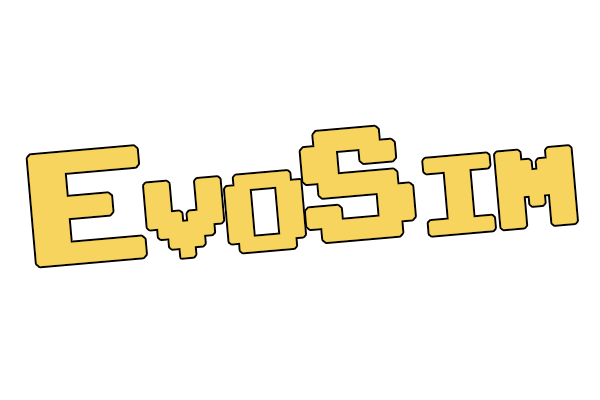
<style>
.page{position:relative;width:600px;height:400px;background:#ffffff}
.page>*{position:absolute;margin:0}
.t1{font:210.3px "ArcadeClassic";letter-spacing:-0.025em;color:#f7d45d;font-variant:small-caps;font-weight:bold}
</style>
<div class="page">
<p class="t1" style="left:27px;top:126px;width:550px;height:141px;rotate:-5deg">EvoSim</p>
</div>
